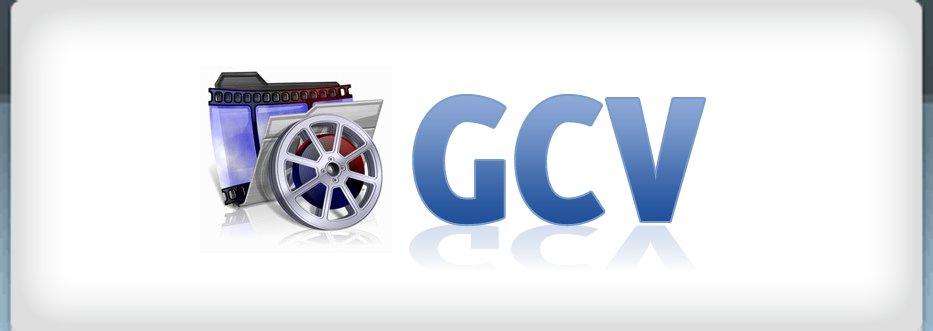
<style>
.page{position:relative;width:933px;height:331px;background:#ffffff}
.page>*{position:absolute;margin:0}
.t1{font:193.5px "Delicious-Heavy"}
</style>
<div class="page">
<p class="t1" style="left:414px;top:95px;width:291px;height:130px">GCV</p>
</div>
